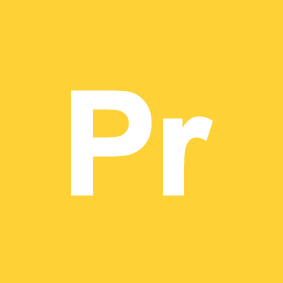
<style>
.page{position:relative;width:283px;height:283px;background:#fed136}
.page>*{position:absolute;margin:0}
.t1{font:145.1px "Arial-BoldMT";letter-spacing:-0.05em;color:#ffffff;font-weight:bold}
</style>
<div class="page">
<p class="t1" style="left:71px;top:90px;width:142px;height:106px">Pr</p>
</div>
